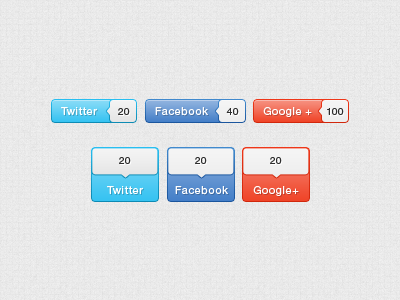
<style>
.page{position:relative;width:400px;height:300px}
.page>*{position:absolute;margin:0}
.t1{font:11px "Helvetica-5-Normal";letter-spacing:0.05em;color:#ffffff}
.t2{font:10px "Helvetica-5-Normal";letter-spacing:0.05em;color:#2e2e2e}
</style>
<div class="page">
<p class="t1" style="left:61px;top:107px;width:36px;height:8px">Twitter</p>
<p class="t2" style="left:118px;top:108px;width:12px;height:7px">20</p>
<p class="t1" style="left:155px;top:107px;width:53px;height:9px">Facebook</p>
<p class="t2" style="left:226px;top:108px;width:13px;height:7px">40</p>
<p class="t1" style="left:263px;top:107px;width:49px;height:10px">Google +</p>
<p class="t2" style="left:327px;top:108px;width:17px;height:7px">100</p>
<p class="t2" style="left:119px;top:157px;width:12px;height:7px">20</p>
<p class="t2" style="left:195px;top:157px;width:12px;height:7px">20</p>
<p class="t2" style="left:270px;top:157px;width:12px;height:7px">20</p>
<p class="t1" style="left:107px;top:186px;width:36px;height:8px">Twitter</p>
<p class="t1" style="left:175px;top:186px;width:53px;height:9px">Facebook</p>
<p class="t1" style="left:253px;top:186px;width:46px;height:10px">Google+</p>
</div>
